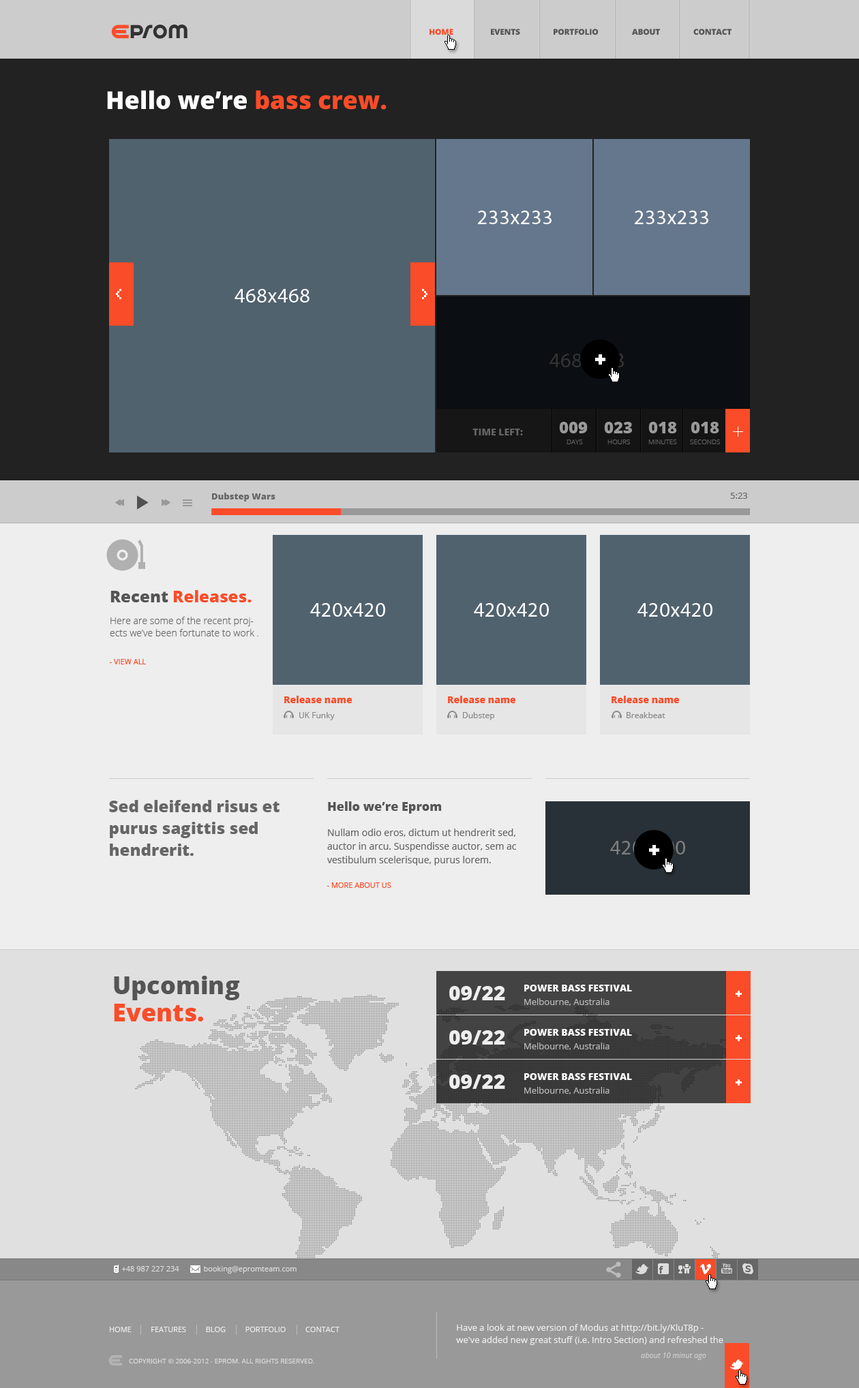
<style>
.page{position:relative;width:859px;height:1388px}
.page>*{position:absolute;margin:0}
.t1{font:21px "SpinCycleOT";letter-spacing:0.025em;color:#333333}
.t2{font:8.2px "OpenSans-Extrabold";letter-spacing:-0.025em;color:#fa4c29;text-transform:uppercase}
.t3{font:8.2px "OpenSans-Extrabold";letter-spacing:-0.025em;color:#555555;text-transform:uppercase}
.t4{font:24.5px "OpenSans-Extrabold";color:#ffffff}
.t5{font:24.5px "OpenSans-Extrabold";color:#fa4c29}
.t6{font:20.4px "MyriadPro-Regular";letter-spacing:0.025em;color:#ffffff}
.t7{font:16.4px "OpenSans-Extrabold";color:#999999}
.t8{font:9.5px "OpenSans-Extrabold";color:#636363}
.t9{font:6.8px "OpenSans-Light";color:#666666}
.t10{font:8.9px "OpenSans-Extrabold";color:#666666}
.t11{font:8.9px "OpenSans";color:#666666}
.t12{font:16.4px "OpenSans-Extrabold";color:#fa4c29}
.t13{font:16.4px "OpenSans-Extrabold";color:#555555}
.t14{font:9.5px/12.3px "OpenSans-Light";color:#666666}
.t15{font:7.5px "OpenSans";color:#fa4c29;text-transform:uppercase}
.t16{font:9.5px "OpenSans-Extrabold";color:#fa4c29}
.t17{font:8.2px "OpenSans";color:#888888}
.t18{font:16.4px/21.8px "OpenSans-Extrabold";color:#666666}
.t19{font:12.3px "OpenSans-Extrabold";color:#555555}
.t20{font:9.5px/13.6px "OpenSans";color:#666666}
.t21{font:24.5px/27.3px "OpenSans-Extrabold";color:#555555}
.t22{font:24.5px/27.3px "OpenSans-Extrabold";color:#fa4c29}
.t23{font:20.4px "OpenSans-Extrabold";color:#eeeeee}
.t24{font:9.5px "OpenSans-Extrabold";color:#ffffff}
.t25{font:8.9px "OpenSans";color:#bbbbbb}
.t26{font:7.5px "OpenSans";color:#dddddd}
.t27{font:8.9px/12.3px "OpenSans";color:#eeeeee}
.t28{font:7.5px "OpenSans";color:#eeeeee;text-transform:uppercase}
.t29{font:6.8px "OpenSans";color:#dddddd;text-transform:uppercase}
.t30{font:7.5px "OpenSans-Italic";color:#cccccc}
</style>
<div class="page">
<p class="t1" style="left:130px;top:25px;width:57px;height:14px">prom</p>
<p class="t2" style="left:429px;top:29px;width:24px;height:6px">Home</p>
<p class="t3" style="left:491px;top:29px;width:29px;height:6px">EVENTS</p>
<p class="t3" style="left:553px;top:29px;width:45px;height:6px">PORTFOLIO</p>
<p class="t3" style="left:632px;top:29px;width:28px;height:6px">ABOUT</p>
<p class="t3" style="left:693px;top:29px;width:38px;height:6px">Contact</p>
<p class="t4" style="left:107px;top:90px;width:279px;height:20px">Hello we’re <span class="t5">bass crew.</span></p>
<p class="t6" style="left:478px;top:211px;width:73px;height:13px">233x233</p>
<p class="t6" style="left:635px;top:211px;width:73px;height:13px">233x233</p>
<p class="t6" style="left:234px;top:289px;width:75px;height:14px">468x468</p>
<p class="t7" style="left:559px;top:422px;width:29px;height:12px">009</p>
<p class="t7" style="left:604px;top:422px;width:28px;height:12px">023</p>
<p class="t7" style="left:648px;top:422px;width:29px;height:12px">018</p>
<p class="t7" style="left:690px;top:422px;width:29px;height:12px">018</p>
<p class="t8" style="left:472px;top:429px;width:51px;height:7px">TIME LEFT:</p>
<p class="t9" style="left:566px;top:440px;width:17px;height:4px">DAYS</p>
<p class="t9" style="left:607px;top:440px;width:23px;height:4px">HOURS</p>
<p class="t9" style="left:648px;top:440px;width:29px;height:4px">MINUTES</p>
<p class="t9" style="left:690px;top:440px;width:30px;height:4px">SECONDS</p>
<p class="t10" style="left:212px;top:493px;width:63px;height:9px">Dubstep Wars</p>
<p class="t11" style="left:730px;top:493px;width:17px;height:6px">5:23</p>
<p class="t12" style="left:110px;top:590px;width:142px;height:13px"><span class="t13">Recent </span>Releases.</p>
<p class="t6" style="left:310px;top:603px;width:75px;height:14px">420x420</p>
<p class="t6" style="left:474px;top:603px;width:75px;height:14px">420x420</p>
<p class="t6" style="left:637px;top:603px;width:75px;height:14px">420x420</p>
<p class="t14" style="left:110px;top:617px;width:148px;height:20px">Here are some of the recent projects we’ve been fortunate to work .</p>
<p class="t15" style="left:109px;top:659px;width:37px;height:6px">- view all</p>
<p class="t16" style="left:284px;top:696px;width:68px;height:7px">Release name</p>
<p class="t16" style="left:448px;top:696px;width:67px;height:7px">Release name</p>
<p class="t16" style="left:611px;top:696px;width:68px;height:7px">Release name</p>
<p class="t17" style="left:299px;top:712px;width:36px;height:8px">UK Funky</p>
<p class="t17" style="left:463px;top:712px;width:31px;height:8px">Dubstep</p>
<p class="t17" style="left:626px;top:712px;width:39px;height:6px">Breakbeat</p>
<p class="t18" style="left:109px;top:800px;width:170px;height:56px">Sed eleifend risus et purus sagittis sed <br>hendrerit.</p>
<p class="t19" style="left:328px;top:802px;width:114px;height:12px">Hello we’re Eprom</p>
<p class="t20" style="left:327px;top:829px;width:189px;height:37px">Nullam odio eros, dictum ut hendrerit sed, auctor in arcu. Suspendisse auctor, sem ac vestibulum scelerisque, purus lorem.</p>
<p class="t15" style="left:326px;top:883px;width:65px;height:5px">- more about us</p>
<p class="t21" style="left:114px;top:976px;width:126px;height:46px">Upcoming <span class="t22">Events.</span></p>
<p class="t23" style="left:449px;top:986px;width:56px;height:15px">09/22</p>
<p class="t24" style="left:524px;top:985px;width:108px;height:7px">POWER BASS FESTIVAL</p>
<p class="t25" style="left:524px;top:999px;width:85px;height:7px">Melbourne, Australia</p>
<p class="t23" style="left:449px;top:1031px;width:56px;height:14px">09/22</p>
<p class="t24" style="left:524px;top:1029px;width:108px;height:7px">POWER BASS FESTIVAL</p>
<p class="t25" style="left:524px;top:1043px;width:85px;height:7px">Melbourne, Australia</p>
<p class="t24" style="left:524px;top:1074px;width:108px;height:6px">POWER BASS FESTIVAL</p>
<p class="t23" style="left:449px;top:1075px;width:56px;height:14px">09/22</p>
<p class="t25" style="left:524px;top:1087px;width:85px;height:8px">Melbourne, Australia</p>
<p class="t26" style="left:121px;top:1266px;width:58px;height:6px">+48 987 227 234</p>
<p class="t26" style="left:204px;top:1266px;width:93px;height:8px">booking@epromteam.com</p>
<p class="t27" style="left:456px;top:1324px;width:267px;height:21px">Have a look at new version of Modus at http://bit.ly/KluT8p - we've added new great stuff (i.e. Intro Section) and refreshed the theme!</p>
<p class="t28" style="left:110px;top:1327px;width:229px;height:6px">Home          Features          Blog          Portfolio          Contact</p>
<p class="t29" style="left:129px;top:1359px;width:185px;height:5px">Copyright © 2006-2012 - EPROM. All rights reserved.</p>
<p class="t30" style="left:641px;top:1353px;width:65px;height:7px">about 10 minut ago</p>
</div>
